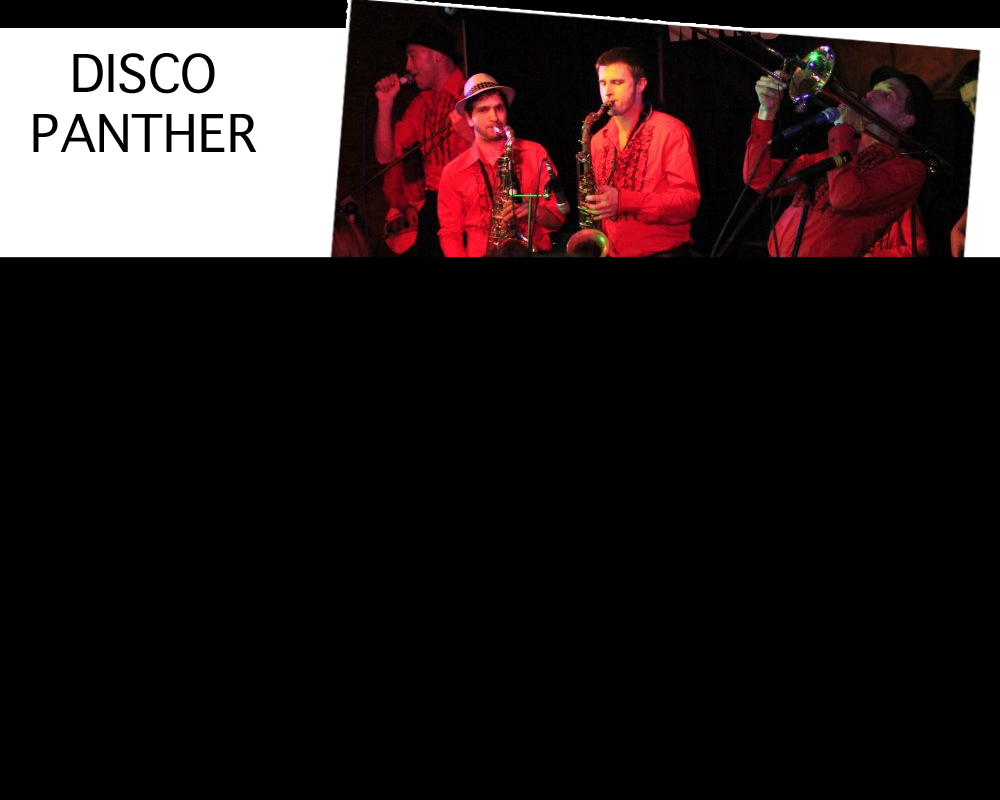
<style>
.page{position:relative;width:1000px;height:800px;background:#000000}
.page>*{position:absolute;margin:0}
.t1{font:50px "GenevaCY";color:#000000}
</style>
<div class="page">
<p class="t1" style="left:33px;top:53px;width:224px;height:99px;text-align:center">DISCO<br>PANTHER</p>
</div>
